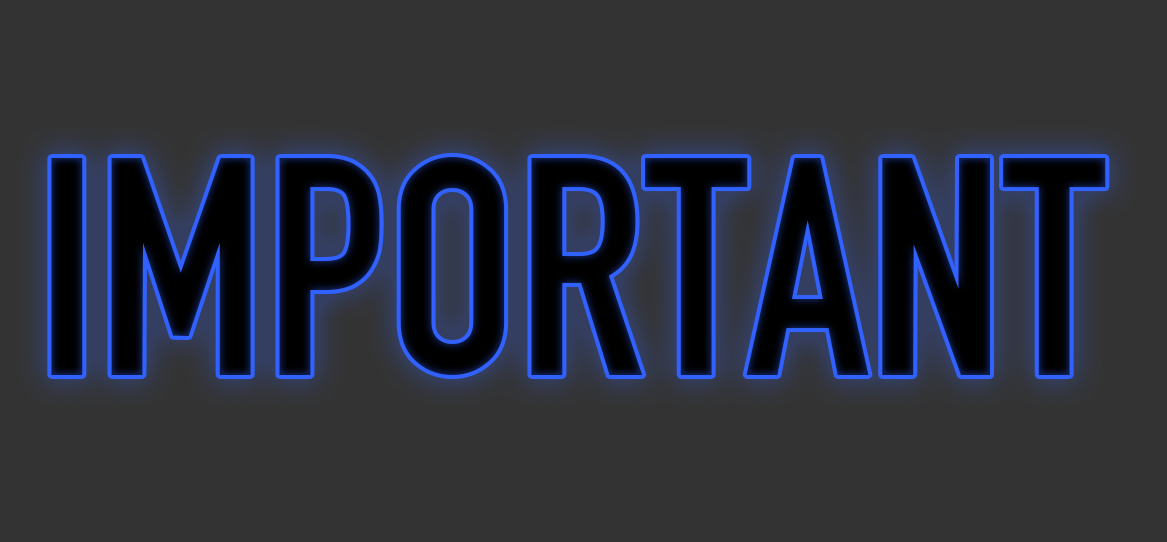
<style>
.page{position:relative;width:1167px;height:542px;background:#333333}
.page>*{position:absolute;margin:0}
.t1{font:302.5px "DINEngschrift";color:#010103}
</style>
<div class="page">
<p class="t1" style="left:51px;top:157px;width:1055px;height:218px">IMPORTANT</p>
</div>
